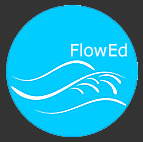
<style>
.page{position:relative;width:143px;height:142px;background:#00ccff}
.page>*{position:absolute;margin:0}
.t1{font:16.7px "Verdana";color:#ffffff}
</style>
<div class="page">
<p class="t1" style="left:71px;top:43px;width:56px;height:14px">FlowEd</p>
</div>
